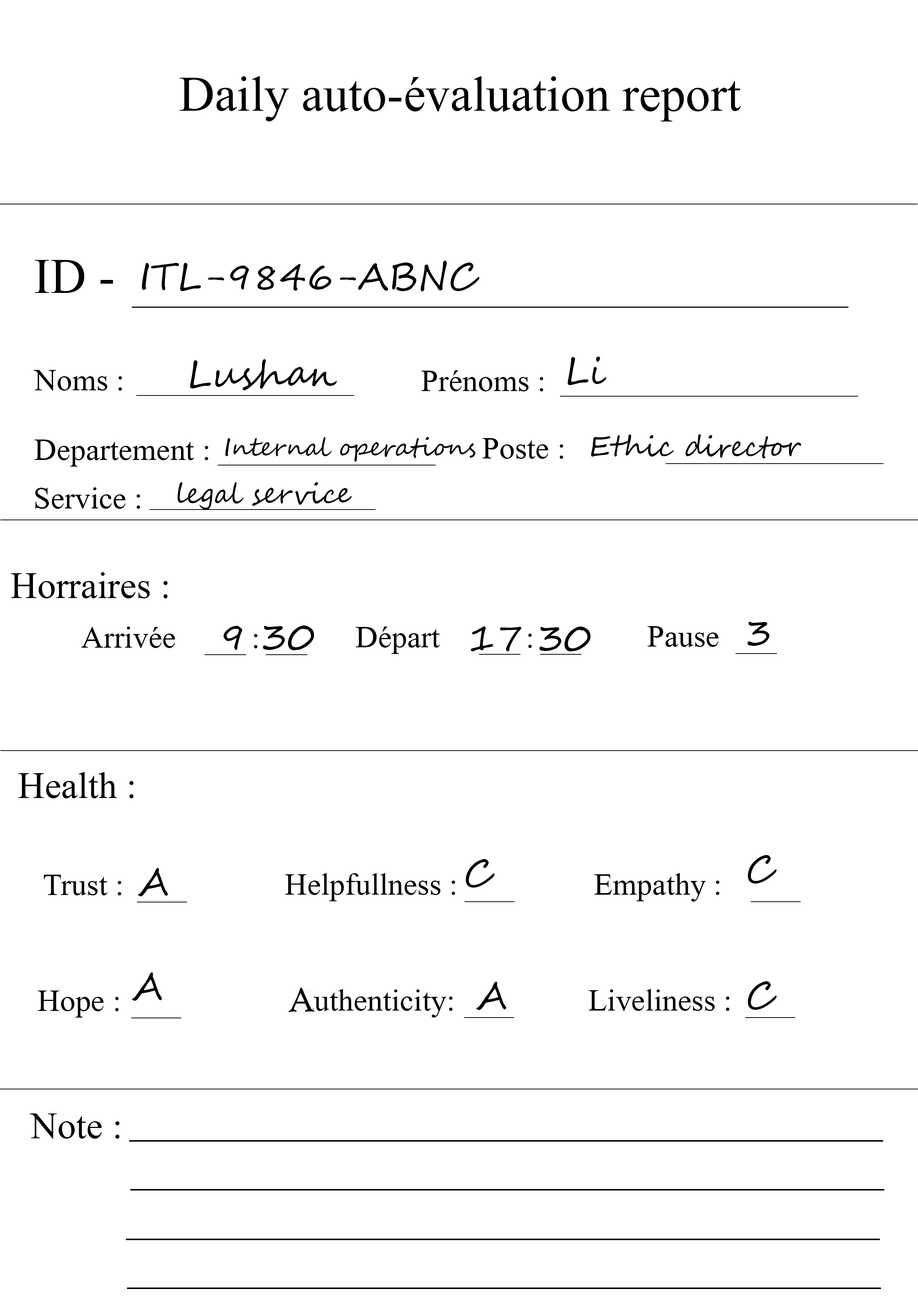
<style>
.page{position:relative;width:918px;height:1299px;background:#ffffff}
.page>*{position:absolute;margin:0}
.t1{font:74px "Microsoft-Himalaya";color:#000000}
.t2{font:37px "SegoeScript";color:#000000}
.t3{font:46.3px "Microsoft-Himalaya";color:#000000}
.t4{font:24.7px "SegoeScript";color:#000000}
.t5{font:27.8px "SegoeScript";color:#000000}
.t6{font:55.5px "Microsoft-Himalaya";color:#000000}
.t7{font:37px "HighTowerText-Reg";color:#000000}
</style>
<div class="page">
<p class="t1" style="left:180px;top:76px;width:561px;height:45px">Daily auto-évaluation report</p>
<p class="t1" style="left:35px;top:260px;width:78px;height:33px">ID -</p>
<p class="t2" style="left:142px;top:261px;width:337px;height:30px">ITL-9846-ABNC</p>
<p class="t2" style="left:190px;top:359px;width:147px;height:32px">Lushan</p>
<p class="t2" style="left:568px;top:357px;width:38px;height:28px">Li</p>
<p class="t3" style="left:34px;top:370px;width:88px;height:21px">Noms :</p>
<p class="t3" style="left:421px;top:370px;width:122px;height:21px">Prénoms :</p>
<p class="t4" style="left:225px;top:437px;width:251px;height:25px">Internal operations</p>
<p class="t3" style="left:482px;top:438px;width:81px;height:21px">Poste :</p>
<p class="t5" style="left:591px;top:434px;width:211px;height:24px">Ethic director</p>
<p class="t3" style="left:34px;top:439px;width:174px;height:27px">Departement :</p>
<p class="t5" style="left:177px;top:482px;width:175px;height:28px">legal service</p>
<p class="t3" style="left:35px;top:487px;width:105px;height:22px">Service :</p>
<p class="t6" style="left:11px;top:572px;width:157px;height:26px">Horraires :</p>
<p class="t3" style="left:81px;top:626px;width:94px;height:22px">Arrivée</p>
<p class="t2" style="left:224px;top:625px;width:90px;height:25px">9 30</p>
<p class="t3" style="left:356px;top:626px;width:84px;height:28px">Départ</p>
<p class="t2" style="left:471px;top:626px;width:120px;height:25px">17 30</p>
<p class="t3" style="left:648px;top:626px;width:71px;height:21px">Pause</p>
<p class="t2" style="left:747px;top:622px;width:23px;height:24px">3</p>
<p class="t3" style="left:254px;top:634px;width:4px;height:14px">:</p>
<p class="t3" style="left:528px;top:633px;width:4px;height:15px">:</p>
<p class="t6" style="left:18px;top:772px;width:116px;height:26px">Health :</p>
<p class="t2" style="left:748px;top:855px;width:29px;height:28px">C</p>
<p class="t2" style="left:138px;top:868px;width:30px;height:28px">A</p>
<p class="t2" style="left:466px;top:859px;width:29px;height:28px">C</p>
<p class="t3" style="left:44px;top:874px;width:77px;height:21px">Trust :</p>
<p class="t3" style="left:285px;top:873px;width:170px;height:28px">Helpfullness :</p>
<p class="t3" style="left:594px;top:873px;width:126px;height:28px">Empathy :</p>
<p class="t2" style="left:132px;top:972px;width:30px;height:29px">A</p>
<p class="t7" style="left:288px;top:987px;width:27px;height:25px">A</p>
<p class="t3" style="left:301px;top:989px;width:152px;height:28px">authenticity:</p>
<p class="t2" style="left:476px;top:981px;width:30px;height:29px">A</p>
<p class="t3" style="left:589px;top:989px;width:141px;height:22px">Liveliness :</p>
<p class="t2" style="left:748px;top:981px;width:29px;height:29px">C</p>
<p class="t3" style="left:38px;top:990px;width:81px;height:27px">Hope :</p>
<p class="t6" style="left:30px;top:1113px;width:90px;height:25px">Note :</p>
</div>
